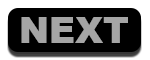
<style>
.page{position:relative;width:150px;height:60px;background:#000000}
.page>*{position:absolute;margin:0}
.t1{font:36px "Arial-Black";color:#a5a5a5}
</style>
<div class="page">
<p class="t1" style="left:21px;top:17px;width:107px;height:26px">NEXT</p>
</div>
